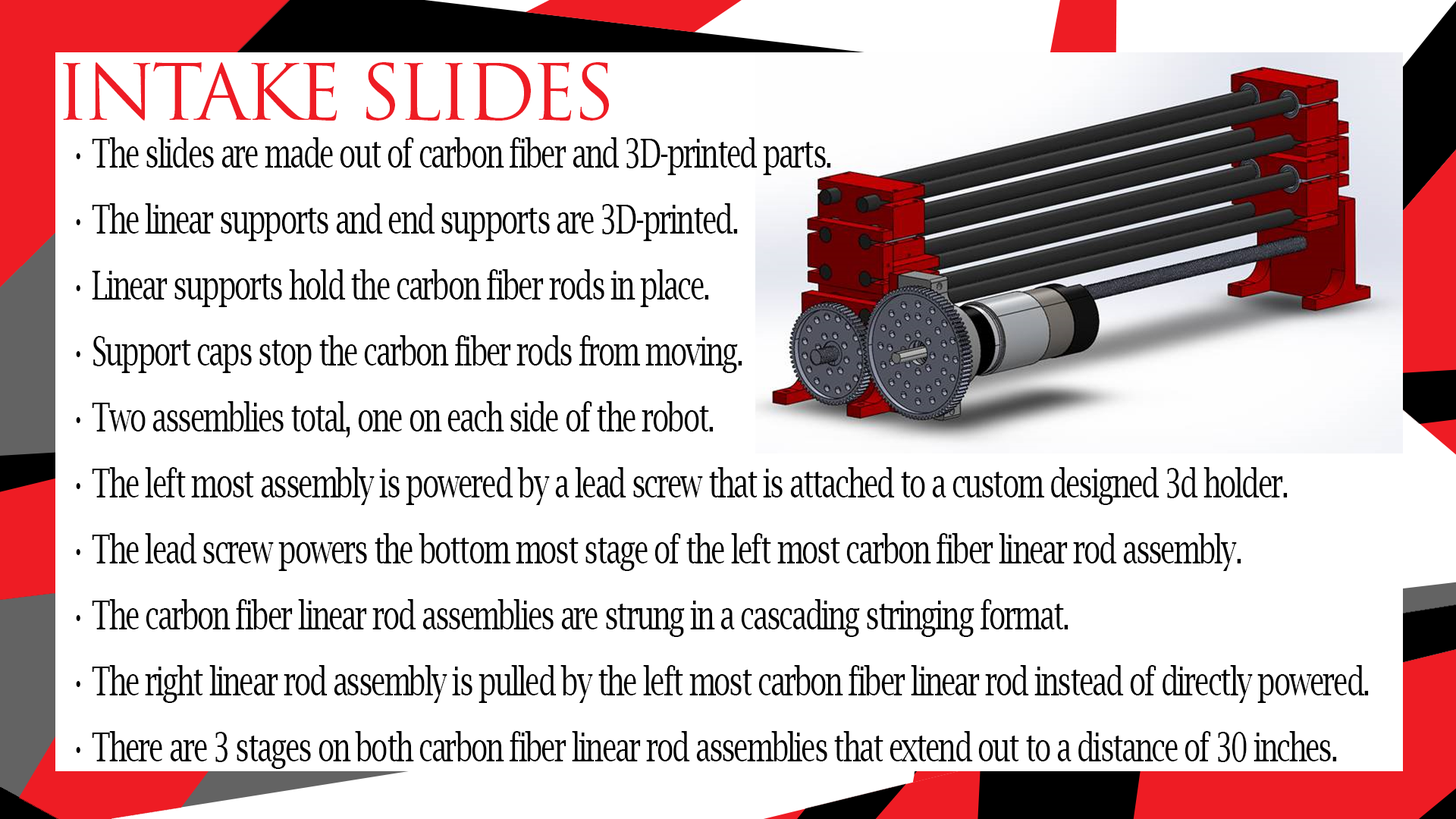
<style>
.page{position:relative;width:1456px;height:819px;background:#ffffff}
.page>*{position:absolute;margin:0}
.t1{font:75.8px "TrajanPro-Regular";letter-spacing:-0.06em;color:#ee1c24}
.t2{font:39.6px/66px "LucidaBright";letter-spacing:-0.06em;color:#000000;scale:0.71 1}
.t3{font:39.6px/66px "FranklinGothic-Heavy";letter-spacing:-0.06em;color:#000000;scale:0.71 1}
</style>
<div class="page">
<p class="t1" style="left:63px;top:62px;width:546px;height:59px">INTAKE SLIDES</p>
<p class="t2" style="left:76px;top:137px;width:1293px;height:632px"><span class="t3"> </span>• The slides are made out of carbon fiber and 3D-printed parts.<br> • The linear supports and end supports are 3D-printed.<br> • Linear supports hold the carbon fiber rods in place.<br> • Support caps stop the carbon fiber rods from moving.<br> • Two assemblies total, one on each side of the robot.<br> • The left most assembly is powered by a lead screw that is attached to a custom designed 3d holder.<br> • The lead screw powers the bottom most stage of the left most carbon fiber linear rod assembly.<br> • The carbon fiber linear rod assemblies are strung in a cascading stringing format. <br> • The right linear rod assembly is pulled by the left most carbon fiber linear rod instead of directly powered.<br>    • There are 3 stages on both carbon fiber linear rod assemblies that extend out to a distance of 30 inches.</p>
</div>
